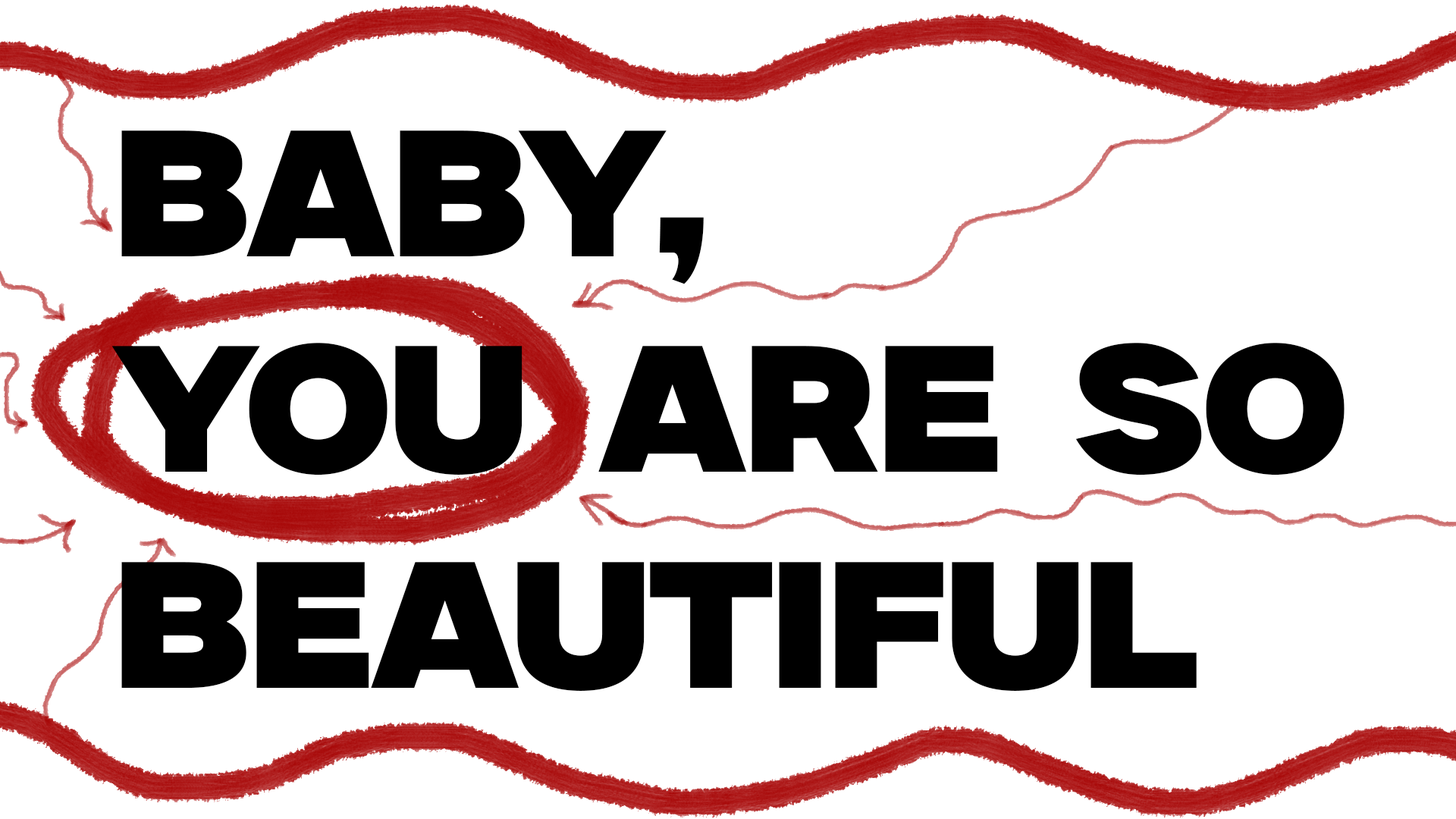
<style>
.page{position:relative;width:1456px;height:819px;background:#ffffff}
.page>*{position:absolute;margin:0}
.t1{font:179.6px "MilkerRegular";color:#000000}
</style>
<div class="page">
<p class="t1" style="left:111px;top:130px;width:1234px;height:561px">baby, <br>you are so <br>beautiful</p>
</div>
